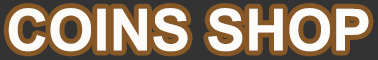
<style>
.page{position:relative;width:378px;height:60px;background:#875826}
.page>*{position:absolute;margin:0}
.t1{font:58px "Arial-BoldMT";color:#ffffff}
</style>
<div class="page">
<p class="t1" style="left:8px;top:8px;width:361px;height:44px">COINS SHOP</p>
</div>
